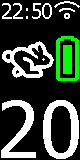
<style>
.page{position:relative;width:80px;height:160px;background:#000000}
.page>*{position:absolute;margin:0}
.t1{font:20.7px "Tahoma";color:#ffffff}
.t2{font:77.5px "Tahoma";color:#ffffff}
</style>
<div class="page">
<p class="t1" style="left:2px;top:3px;width:50px;height:16px">22:50</p>
<p class="t2" style="left:1px;top:100px;width:78px;height:59px">20</p>
</div>
